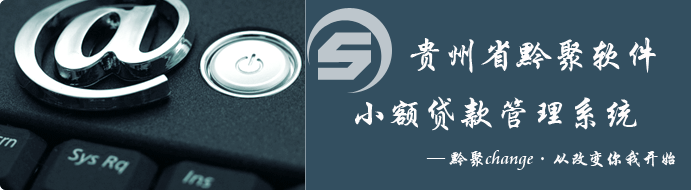
<style>
.page{position:relative;width:691px;height:190px;background:#334f60}
.page>*{position:absolute;margin:0}
.t1{font:36px "STXingkai";color:#fefcfc}
.t2{font:18px "STXingkai";color:#fefcfc}
.t3{font:18px "CataneoBT-Regular";color:#fefcfc}
</style>
<div class="page">
<p class="t1" style="left:410px;top:37px;width:246px;height:36px">贵州省黔聚软件</p>
<p class="t1" style="left:355px;top:96px;width:282px;height:35px">小额贷款管理系统</p>
<p class="t2" style="left:426px;top:150px;width:249px;height:20px">— 黔聚<span class="t3">change</span>·从改变你我开始</p>
</div>
